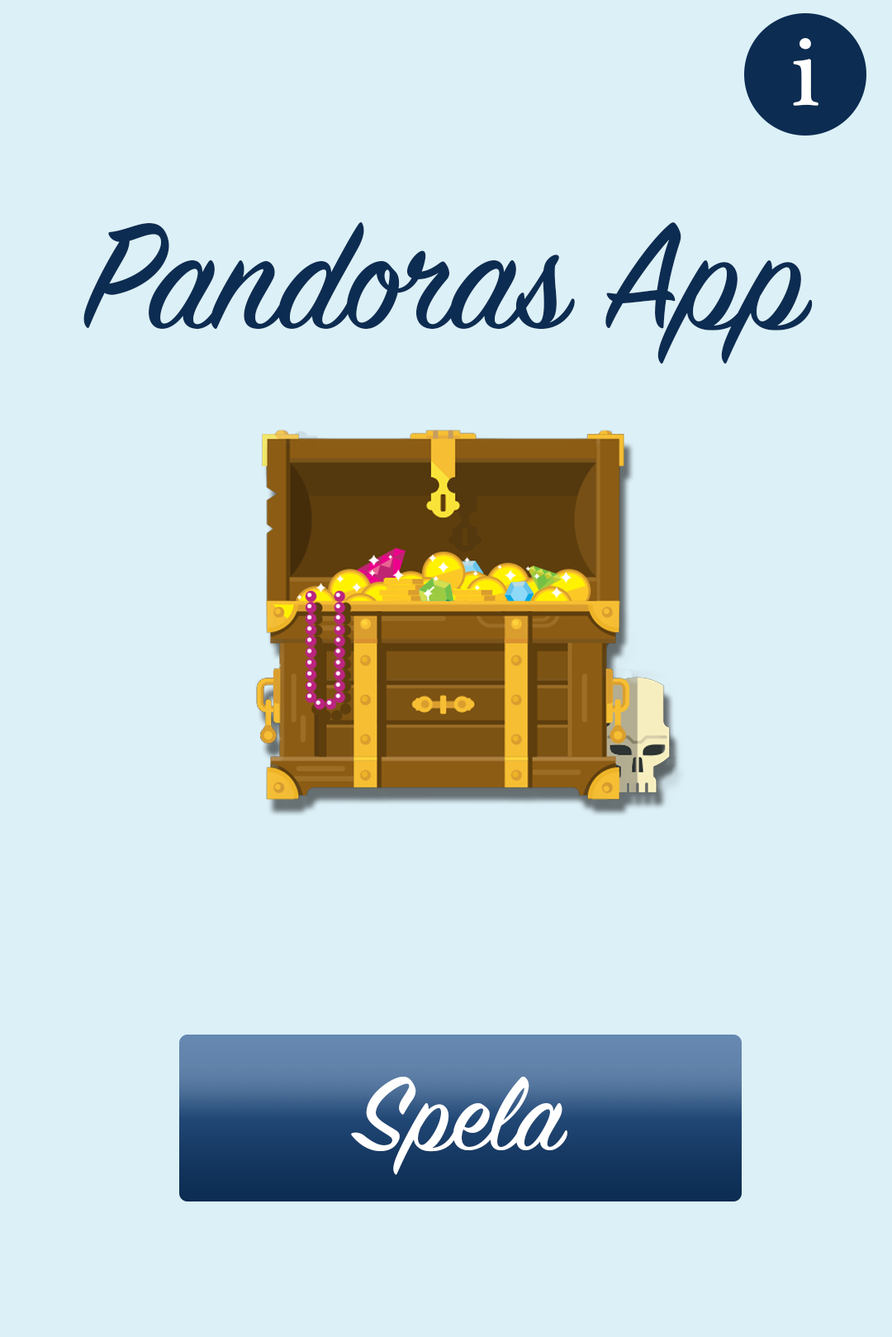
<style>
.page{position:relative;width:892px;height:1337px;background:#dcf0f7}
.page>*{position:absolute;margin:0}
.t1{font:99.1px "PlantagenetCherokee";color:#ffffff}
.t2{font:165.2px "SignPainter-HouseScript";color:#0c2c52}
.t3{font:115.6px "SignPainter-HouseScript";color:#ffffff}
</style>
<div class="page">
<p class="t1" style="left:793px;top:38px;width:26px;height:68px">i</p>
<p class="t2" style="left:83px;top:221px;width:730px;height:143px">Pandoras App</p>
<p class="t3" style="left:351px;top:1076px;width:217px;height:99px">Spela</p>
</div>
